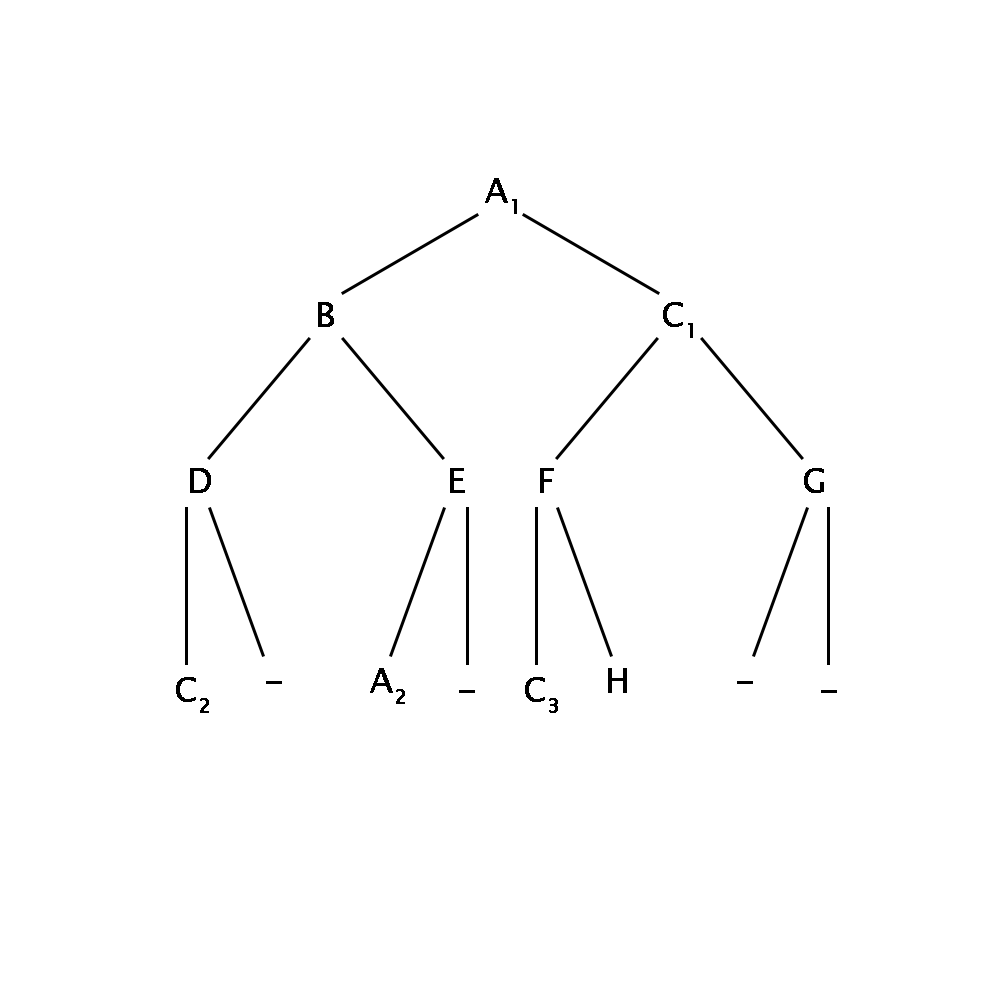
<style>
.page{position:relative;width:1000px;height:1000px;background:#ffffff}
.page>*{position:absolute;margin:0}
.t1{font:12px "LucidaSansUnicode";color:#000000;font-weight:bold}
</style>
<div class="page">
<p class="t1" style="left:485px;top:178px;width:32px;height:36px;text-align:center">A1</p>
<p class="t1" style="left:318px;top:302px;width:16px;height:25px;text-align:center">B</p>
<p class="t1" style="left:663px;top:302px;width:30px;height:36px;text-align:center">C1</p>
<p class="t1" style="left:190px;top:468px;width:21px;height:25px;text-align:center">D</p>
<p class="t1" style="left:450px;top:468px;width:15px;height:25px;text-align:center">E</p>
<p class="t1" style="left:540px;top:468px;width:14px;height:25px;text-align:center">F</p>
<p class="t1" style="left:804px;top:468px;width:20px;height:25px;text-align:center">G</p>
<p class="t1" style="left:176px;top:677px;width:33px;height:36px;text-align:center">C2</p>
<p class="t1" style="left:370px;top:668px;width:35px;height:36px;text-align:center">A2</p>
<p class="t1" style="left:525px;top:677px;width:33px;height:36px;text-align:center">C3</p>
<p class="t1" style="left:608px;top:668px;width:19px;height:25px;text-align:center">H</p>
</div>
